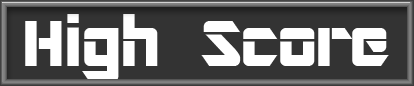
<style>
.page{position:relative;width:414px;height:86px;background:#333333}
.page>*{position:absolute;margin:0}
.t1{font:72px "ARDESTINE";color:#ffffff}
</style>
<div class="page">
<p class="t1" style="left:25px;top:14px;width:364px;height:68px">High Score</p>
</div>
